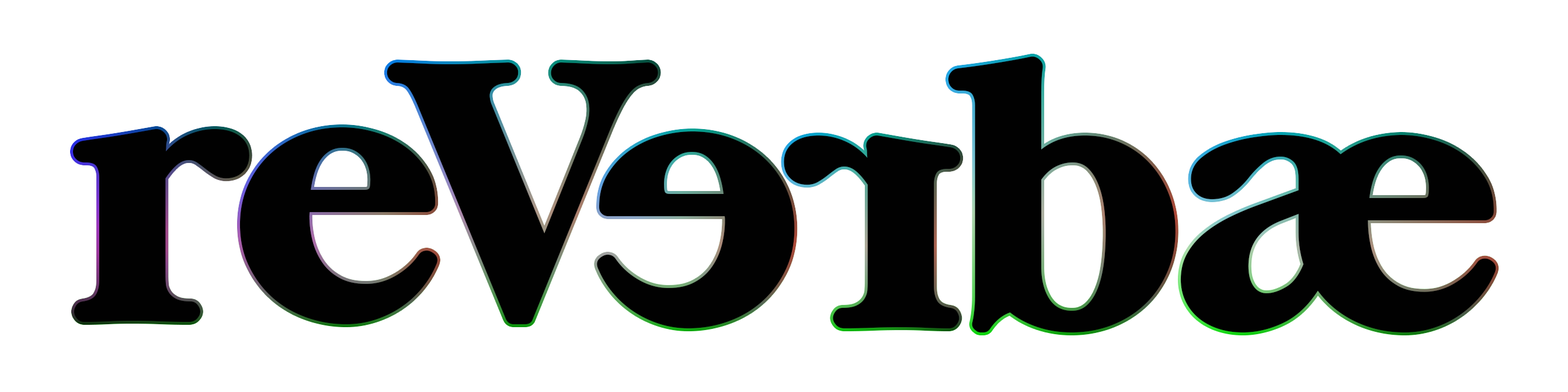
<style>
.page{position:relative;width:1568px;height:392px;background:#ffffff}
.page>*{position:absolute;margin:0}
.t1{font:350.4px "ZTChintzy-Bold";color:#010101}
</style>
<div class="page">
<p class="t1" style="left:387px;top:62px;width:271px;height:262px">V</p>
<p class="t1" style="left:948px;top:56px;width:228px;height:276px">b</p>
<p class="t1" style="left:73px;top:128px;width:176px;height:194px">r</p>
<p class="t1" style="left:239px;top:127px;width:198px;height:197px">e</p>
<p class="t1" style="left:597px;top:131px;width:198px;height:197px;rotate:180deg">e</p>
<p class="t1" style="left:784px;top:135px;width:177px;height:193px;rotate:180deg">r</p>
<p class="t1" style="left:1180px;top:135px;width:316px;height:197px">æ</p>
</div>
